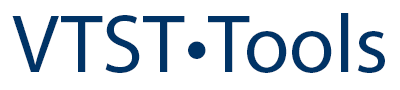
<style>
.page{position:relative;width:400px;height:90px;background:#ffffff}
.page>*{position:absolute;margin:0}
.t1{font:83.3px "MyriadPro-Regular";color:#003366}
</style>
<div class="page">
<p class="t1" style="left:12px;top:13px;width:373px;height:60px">VTST•Tools</p>
</div>
